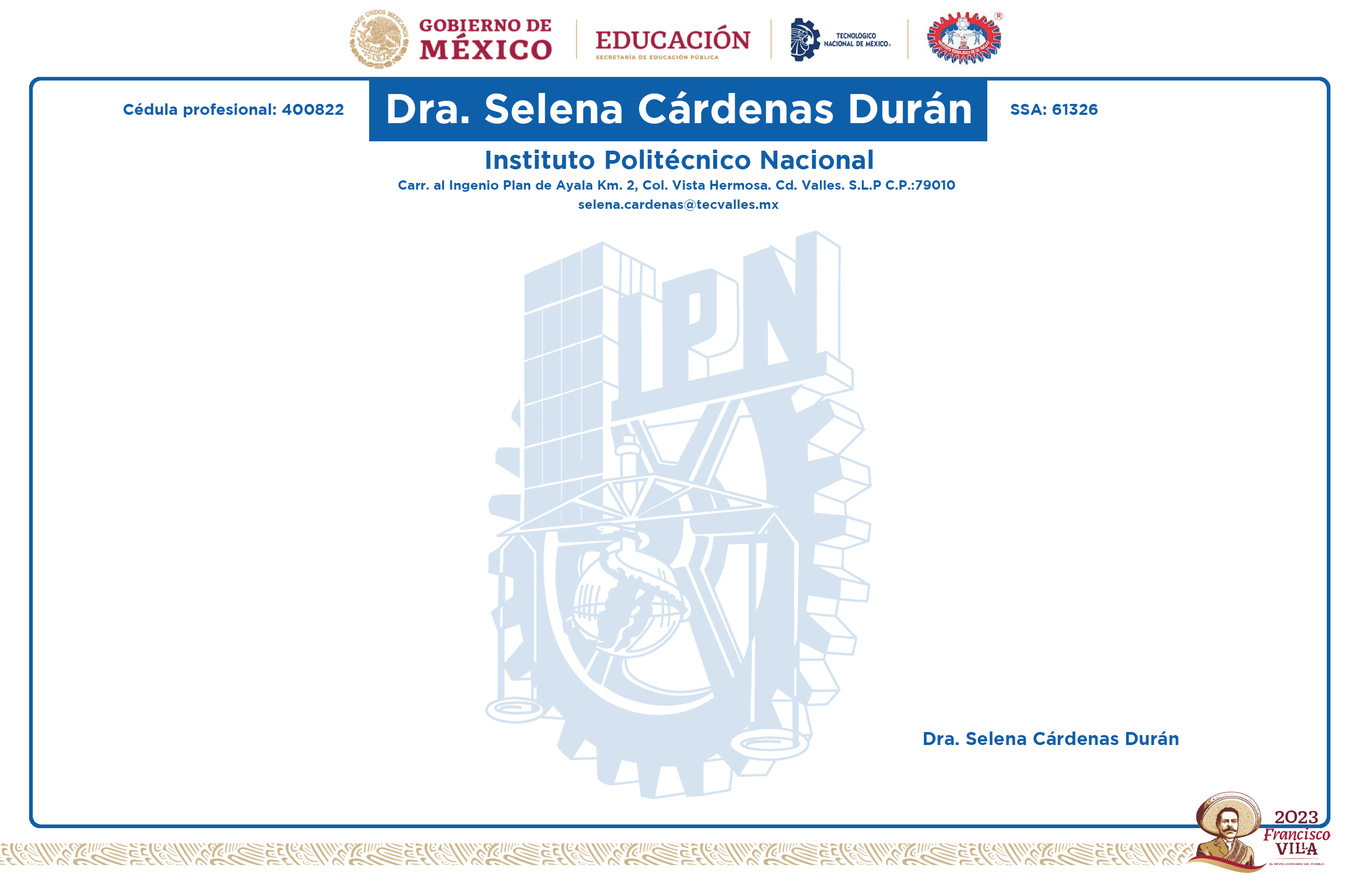
<style>
.page{position:relative;width:1358px;height:878px;background:#ffffff}
.page>*{position:absolute;margin:0}
.t1{font:41.7px "Gotham-Bold";color:#ffffff}
.t2{font:15.7px "Gotham-Bold";color:#0e5fa9}
.t3{font:25.9px "Gotham-Bold";color:#0e5fa9}
.t4{font:13.2px "Gotham-Bold";color:#0e5fa9}
.t5{font:18.2px "Gotham-Bold";color:#0e5fa9}
</style>
<div class="page">
<p class="t1" style="left:388px;top:91px;width:582px;height:33px">Dra. Selena Cárdenas Durán</p>
<p class="t2" style="left:123px;top:103px;width:221px;height:14px">Cédula profesional: 400822</p>
<p class="t2" style="left:1010px;top:104px;width:88px;height:11px">SSA: 61326</p>
<p class="t3" style="left:486px;top:149px;width:387px;height:20px">Instituto Politécnico Nacional</p>
<p class="t4" style="left:398px;top:180px;width:557px;height:12px">Carr. al Ingenio Plan de Ayala Km. 2, Col. Vista Hermosa. Cd. Valles. S.L.P C.P.:79010</p>
<p class="t4" style="left:578px;top:200px;width:201px;height:11px">selena.cardenas@tecvalles.mx</p>
<p class="t5" style="left:924px;top:731px;width:254px;height:14px">Dra. Selena Cárdenas Durán</p>
</div>
